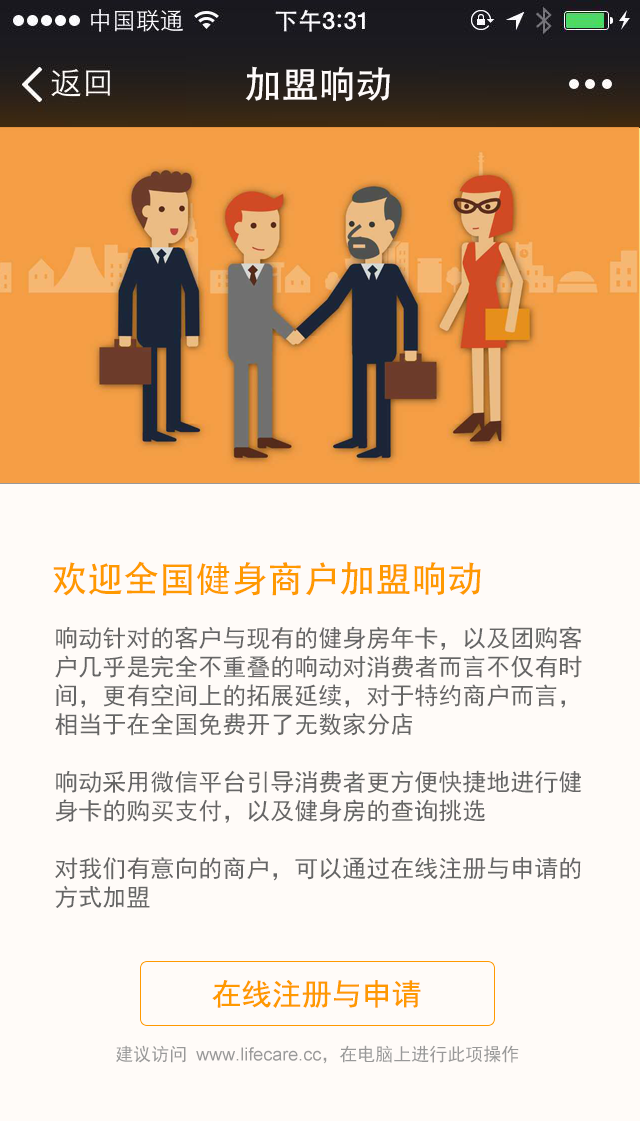
<style>
.page{position:relative;width:640px;height:1121px;background:#fffbf8}
.page>*{position:absolute;margin:0}
.t1{font:37.1px "AdobeHeitiStd-Regular";color:#fffbfa}
.t2{font:36px "AdobeHeitiStd-Regular";color:#ff9900}
.t3{font:24px "SimHei";color:#666666}
.t4{font:30px "SimHei";color:#ff9900}
.t5{font:18px "ArialMT";color:#999999}
.t6{font:18px "SimHei";color:#999999}
</style>
<div class="page">
<p class="t1" style="left:245px;top:66px;width:145px;height:36px">加盟响动</p>
<p class="t2" style="left:53px;top:561px;width:428px;height:35px">欢迎全国健身商户加盟响动</p>
<p class="t3" style="left:55px;top:626px;width:527px;height:282px">响动针对的客户与现有的健身房年卡，以及团购客<br>户几乎是完全不重叠的响动对消费者而言不仅有时<br>间，更有空间上的拓展延续，对于特约商户而言，<br>相当于在全国免费开了无数家分店<br><br>响动采用微信平台引导消费者更方便快捷地进行健<br>身卡的购买支付，以及健身房的查询挑选<br><br>对我们有意向的商户，可以通过在线注册与申请的<br>方式加盟</p>
<p class="t4" style="left:212px;top:980px;width:209px;height:28px">在线注册与申请</p>
<p class="t5" style="left:116px;top:1045px;width:403px;height:19px"><span class="t6">建议访问 </span>www.lifecare.cc<span class="t6">，在电脑上进行此项操作</span></p>
</div>
